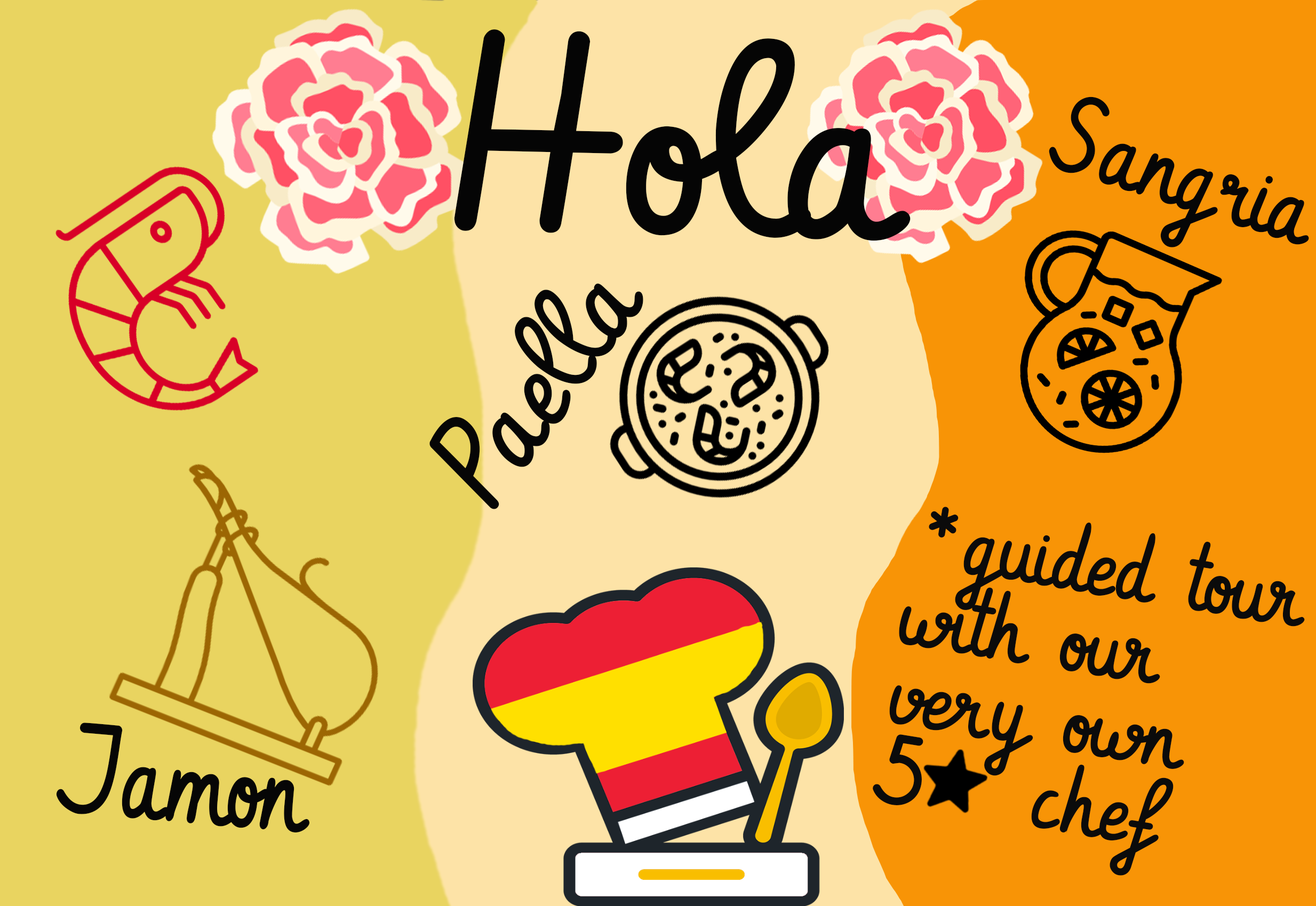
<style>
.page{position:relative;width:1316px;height:906px;background:#e9d460}
.page>*{position:absolute;margin:0}
.t1{font:266.7px "Vibur";color:#050505;scale:1.05 1}
.t2{font:105.1px "Vibur";color:#060606;scale:0.96 1}
.t3{font:123.3px "Vibur";color:#060606}
.t4{font:93.3px/80px "Vibur";color:#0b0b0b}
.t5{font:124.2px "Vibur";color:#060606;scale:0.86 1}
</style>
<div class="page">
<p class="t1" style="left:454px;top:29px;width:456px;height:212px;rotate:1deg">Hola</p>
<p class="t2" style="left:1049px;top:97px;width:260px;height:150px;rotate:18deg">Sangria</p>
<p class="t3" style="left:429px;top:283px;width:214px;height:226px;rotate:-54deg">Paella</p>
<p class="t4" style="left:873px;top:507px;width:432px;height:369px;rotate:9deg">*guided tour<br>with our <br>very own <br>5   chef</p>
<p class="t5" style="left:56px;top:723px;width:253px;height:110px;rotate:5deg">Jamon</p>
</div>
